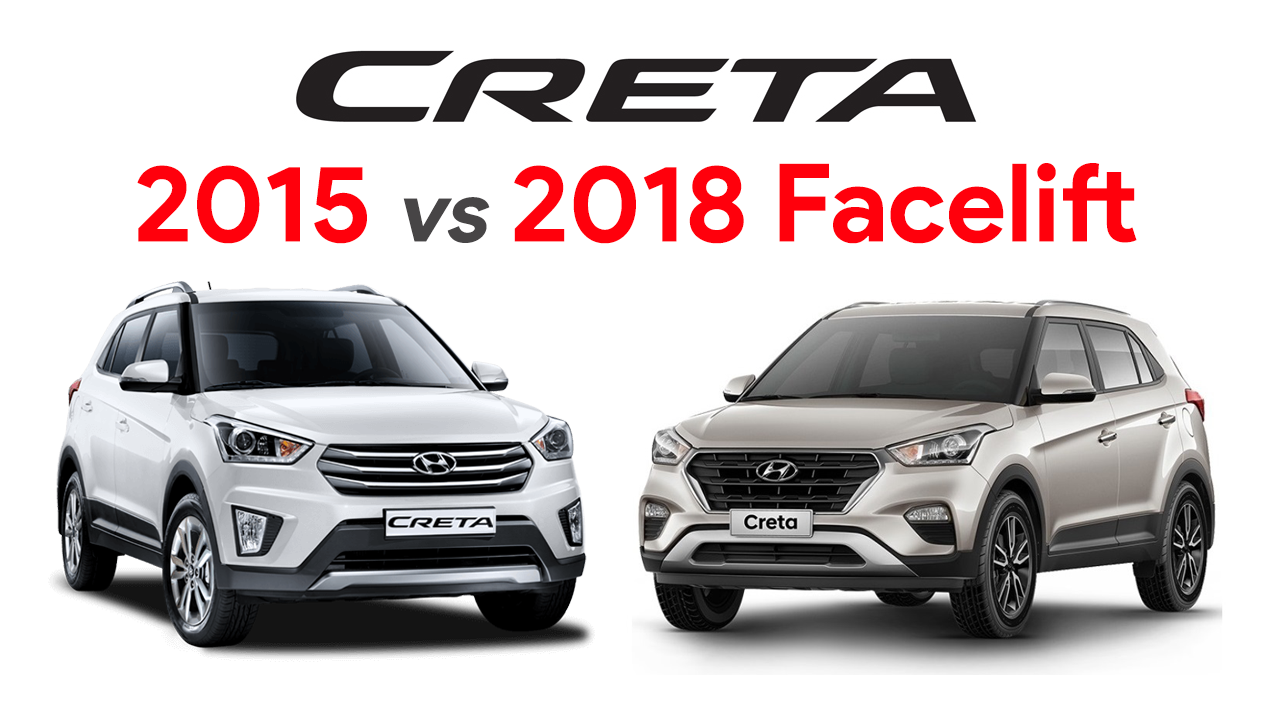
<style>
.page{position:relative;width:1280px;height:720px;background:#ffffff}
.page>*{position:absolute;margin:0}
.t1{font:108.3px "ProductSans-Bold";color:#ff000c}
.t2{font:87.5px "ProductSans-Bold";color:#474546;font-style:italic}
</style>
<div class="page">
<p class="t1" style="left:137px;top:163px;width:1000px;height:81px">2015 <span class="t2">vs</span> 2018 Facelift</p>
</div>
